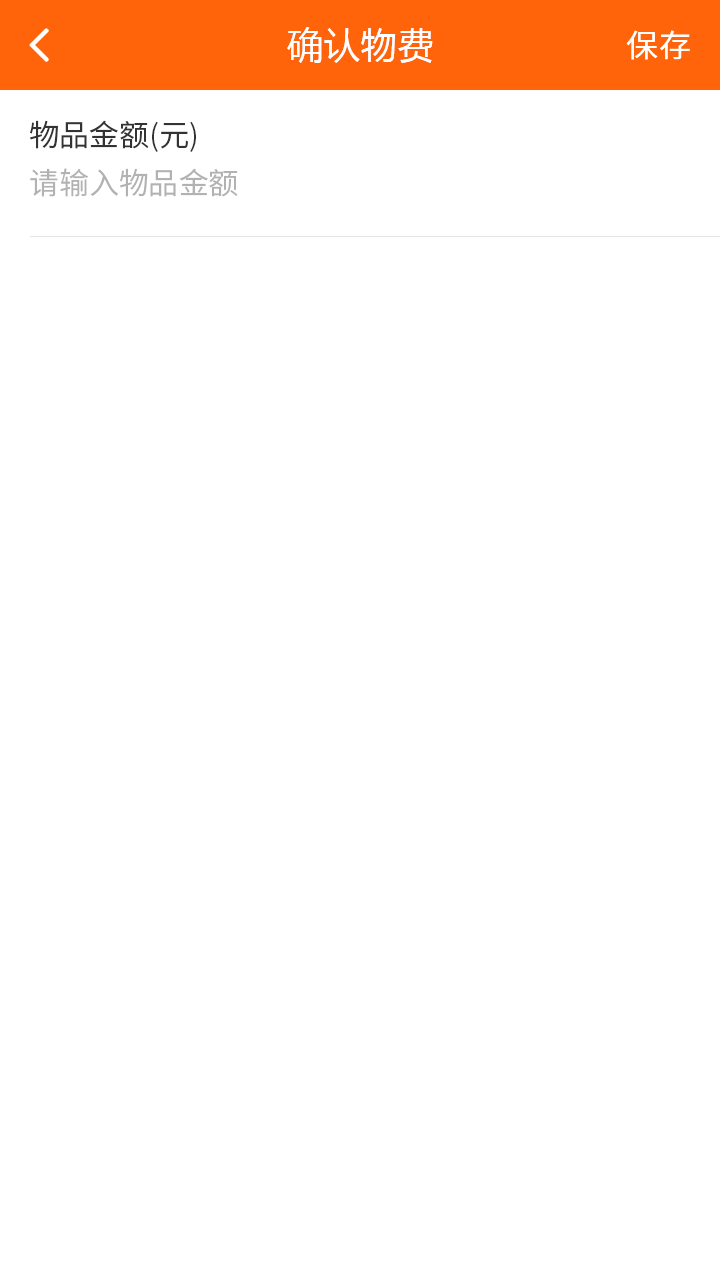
<style>
.page{position:relative;width:720px;height:1280px;background:#ffffff}
.page>*{position:absolute;margin:0}
.t1{font:36px "MicrosoftYaHei";letter-spacing:0.03em;color:#ffffff}
.t2{font:32px "NotoSansCJKsc-Regular";letter-spacing:0.03em;color:#ffffff;font-variant:small-caps}
.t3{font:30px "NotoSansCJKsc-DemiLight";color:#333333}
.t4{font:30px "NotoSansCJKsc-DemiLight";color:#b2b2b2}
</style>
<div class="page">
<p class="t1" style="left:287px;top:27px;width:146px;height:36px">确认物费</p>
<p class="t2" style="left:626px;top:30px;width:64px;height:30px">保存</p>
<p class="t3" style="left:30px;top:120px;width:166px;height:32px">物品金额(元)</p>
<p class="t4" style="left:30px;top:168px;width:208px;height:29px">请输入物品金额</p>
</div>
